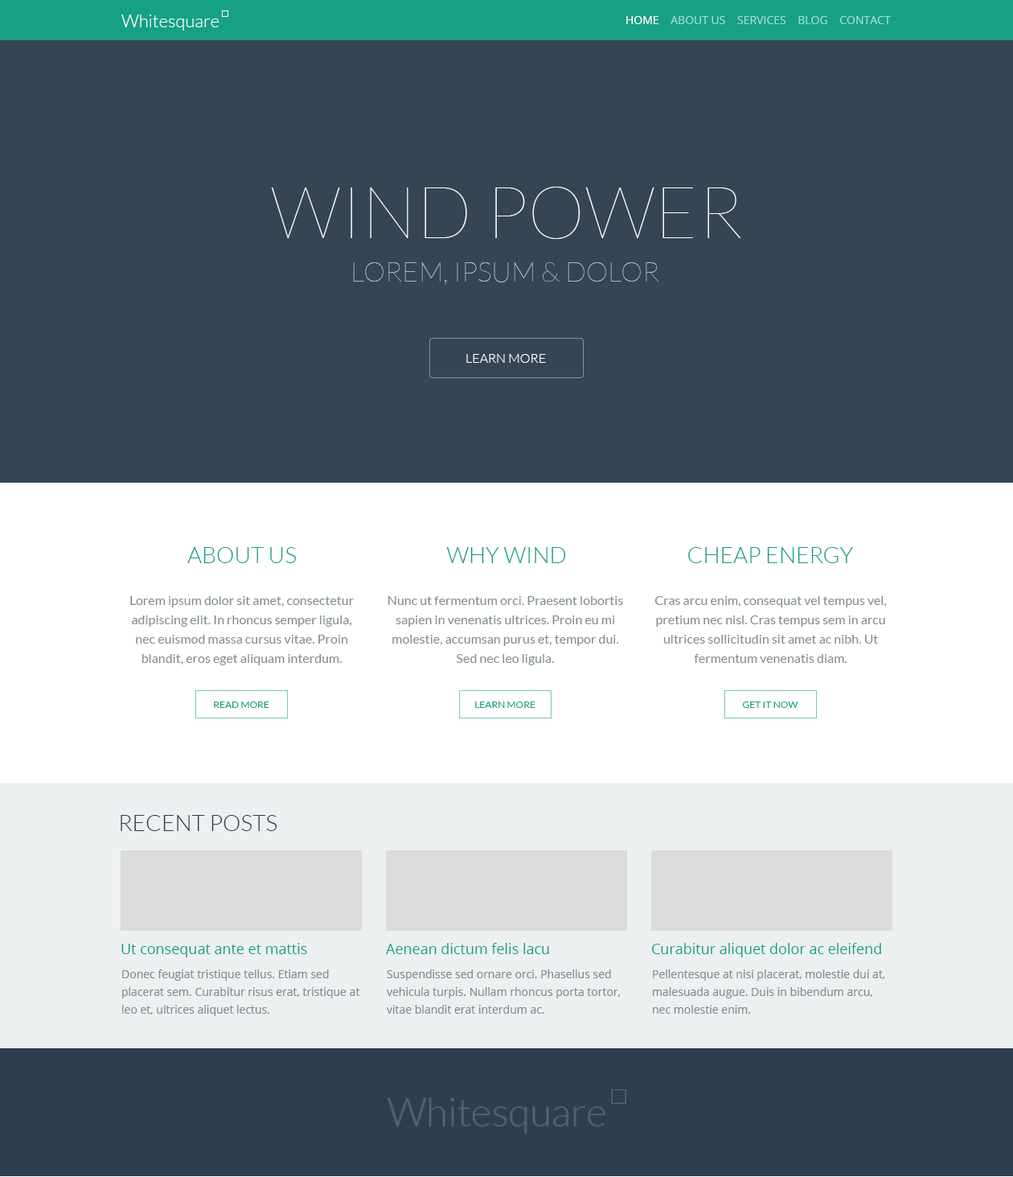
<style>
.page{position:relative;width:1013px;height:1177px;background:#354556}
.page>*{position:absolute;margin:0}
.t1{font:11.3px "OpenSans";color:#9bded1;text-transform:uppercase}
.t2{font:11.3px "OpenSans";color:#ffffff;text-transform:uppercase}
.t3{font:72.4px "Lato-Hairline";color:#ffffff;text-transform:uppercase}
.t4{font:27.3px "Lato-Hairline";color:#a5b6c7;text-transform:uppercase}
.t5{font:12.9px "Lato-Light";color:#ffffff;text-transform:uppercase}
.t6{font:22.5px "Lato-Light";color:#16a085;text-transform:uppercase}
.t7{font:12.9px/19.3px "Lato-Regular";color:#7f8c8d}
.t8{font:9.7px "Lato-Regular";color:#16a085;text-transform:uppercase}
.t9{font:22.5px "Lato-Light";color:#2c3e50;text-transform:uppercase}
.t10{font:14.5px "OpenSans";color:#16a085}
.t11{font:11.3px/17.7px "OpenSans";color:#7f8c8d}
</style>
<div class="page">
<p class="t1" style="left:627px;top:16px;width:264px;height:8px"><span class="t2">home    </span>about us    services    blog    contact</p>
<p class="t3" style="left:271px;top:187px;width:471px;height:52px">wind power</p>
<p class="t4" style="left:353px;top:262px;width:307px;height:23px">Lorem, ipsum &amp; dolor</p>
<p class="t5" style="left:466px;top:354px;width:80px;height:9px">Learn more</p>
<p class="t6" style="left:187px;top:547px;width:109px;height:16px">About us</p>
<p class="t6" style="left:446px;top:547px;width:120px;height:16px">why wind</p>
<p class="t6" style="left:688px;top:547px;width:165px;height:16px">cheap energy</p>
<p class="t7" style="left:130px;top:596px;width:224px;height:69px;text-align:center">Lorem ipsum dolor sit amet, consectetur adipiscing elit. In rhoncus semper ligula, nec euismod massa cursus vitae. Proin blandit, eros eget aliquam interdum.</p>
<p class="t7" style="left:388px;top:596px;width:235px;height:69px;text-align:center">Nunc ut fermentum orci. Praesent lobortis sapien in venenatis ultrices. Proin eu mi molestie, accumsan purus et, tempor dui. Sed nec leo ligula.</p>
<p class="t7" style="left:655px;top:596px;width:232px;height:67px;text-align:center">Cras arcu enim, consequat vel tempus vel, pretium nec nisl. Cras tempus sem in arcu ultrices sollicitudin sit amet ac nibh. Ut fermentum venenatis diam.</p>
<p class="t8" style="left:214px;top:701px;width:55px;height:7px">Read more</p>
<p class="t8" style="left:475px;top:701px;width:61px;height:7px">learn more</p>
<p class="t8" style="left:742px;top:701px;width:57px;height:7px">get it now</p>
<p class="t9" style="left:121px;top:815px;width:156px;height:16px">Recent posts</p>
<p class="t10" style="left:121px;top:943px;width:186px;height:14px">Ut consequat ante et mattis</p>
<p class="t10" style="left:386px;top:943px;width:163px;height:11px">Aenean dictum felis lacu</p>
<p class="t10" style="left:652px;top:943px;width:229px;height:14px">Curabitur aliquet dolor ac eleifend</p>
<p class="t11" style="left:122px;top:969px;width:238px;height:47px">Donec feugiat tristique tellus. Etiam sed placerat sem. Curabitur risus erat, tristique at leo et, ultrices aliquet lectus.</p>
<p class="t11" style="left:387px;top:969px;width:234px;height:44px">Suspendisse sed ornare orci. Phasellus sed vehicula turpis. Nullam rhoncus porta tortor, vitae blandit erat interdum ac.</p>
<p class="t11" style="left:653px;top:969px;width:233px;height:44px">Pellentesque at nisi placerat, molestie dui at, malesuada augue. Duis in bibendum arcu, nec molestie enim.</p>
</div>
